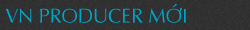
<style>
.page{position:relative;width:250px;height:30px;background:#313131}
.page>*{position:absolute;margin:0}
.t1{font:20px "UVNNhan";color:#00a3c5}
</style>
<div class="page">
<p class="t1" style="left:5px;top:4px;width:181px;height:19px">VN PRODUCER MỚI</p>
</div>
